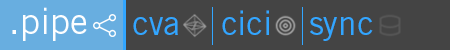
<style>
.page{position:relative;width:450px;height:50px;background:#444444}
.page>*{position:absolute;margin:0}
.t1{font:36px "TradeGothic";color:#fcfeff}
.t2{font:33.4px "TradeGothic";color:#32a6ff}
</style>
<div class="page">
<p class="t1" style="left:12px;top:7px;width:75px;height:34px">.pipe</p>
<p class="t2" style="left:133px;top:17px;width:45px;height:18px">cva</p>
<p class="t2" style="left:222px;top:10px;width:47px;height:25px">cici</p>
<p class="t2" style="left:310px;top:17px;width:63px;height:24px">sync</p>
</div>
